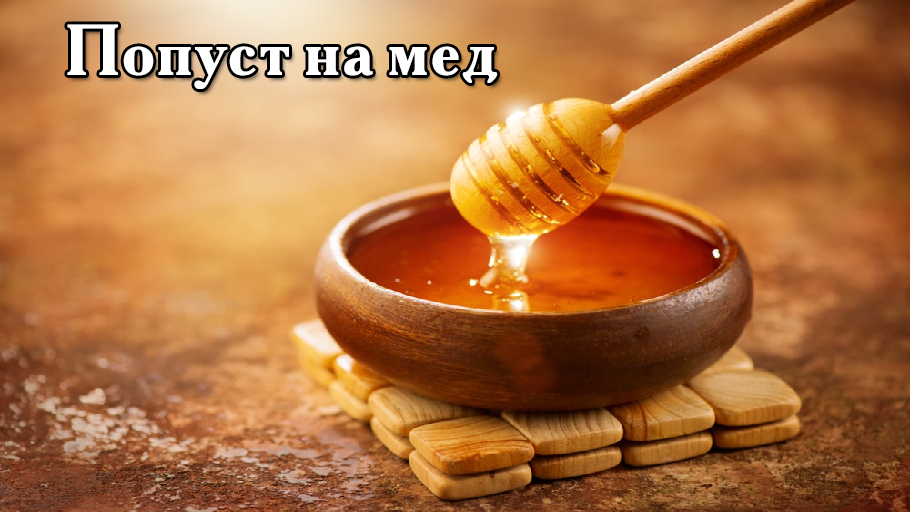
<style>
.page{position:relative;width:910px;height:512px}
.page>*{position:absolute;margin:0}
.t1{font:72px "AkademieAlte";color:#ffffff}
</style>
<div class="page">
<p class="t1" style="left:67px;top:24px;width:431px;height:65px">Попуст на мед</p>
</div>
